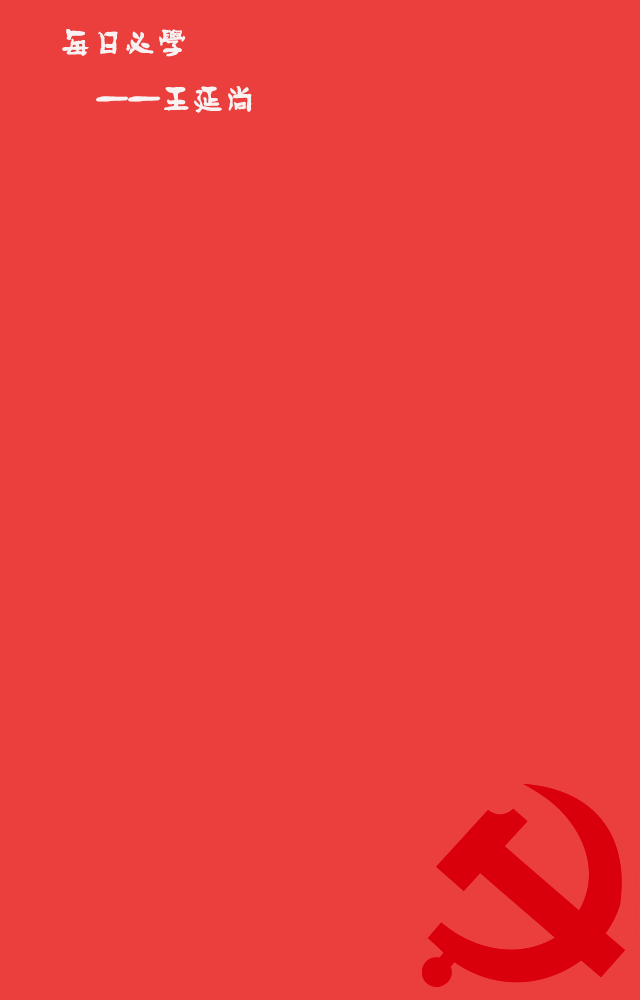
<style>
.page{position:relative;width:640px;height:1000px;background:#eb3f3e}
.page>*{position:absolute;margin:0}
.t1{font:32px "FZPHTFW--GB1-0";color:#f8f2f2}
</style>
<div class="page">
<p class="t1" style="left:62px;top:29px;width:190px;height:84px">每日必学<br>     ——王延尚</p>
</div>
